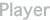
<style>
.page{position:relative;width:50px;height:20px;background:#ffffff}
.page>*{position:absolute;margin:0}
.t1{font:17.5px "Thonburi-Bold";color:#b3b9b4}
</style>
<div class="page">
<p class="t1" style="left:0px;top:2px;width:50px;height:18px">Player</p>
</div>
